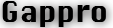
<style>
.page{position:relative;width:113px;height:28px;background:#000000}
.page>*{position:absolute;margin:0}
.t1{font:28px "Silom";color:#000000}
</style>
<div class="page">
<p class="t1" style="left:2px;top:1px;width:104px;height:26px">Gappro</p>
</div>
